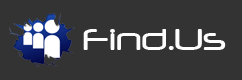
<style>
.page{position:relative;width:242px;height:80px;background:#333333}
.page>*{position:absolute;margin:0}
.t1{font:36px "Neuropol";color:#fefdfd}
</style>
<div class="page">
<p class="t1" style="left:83px;top:29px;width:143px;height:21px">Find.Us</p>
</div>
